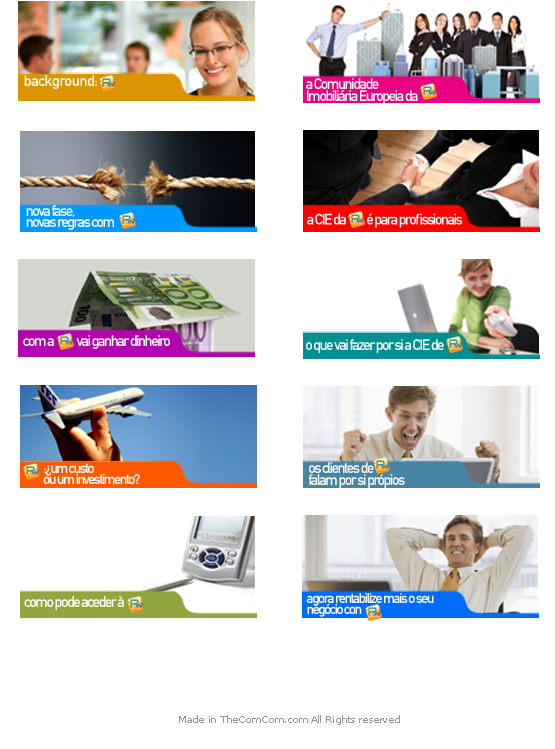
<style>
.page{position:relative;width:555px;height:749px;background:#ffffff}
.page>*{position:absolute;margin:0}
.t1{font:15px "DINMittelschriftStd";letter-spacing:-0.025em;color:#ffffff}
.t2{font:15px/12px "DINMittelschriftStd";letter-spacing:-0.1em;color:#ffffff}
.t3{font:15px/11.2px "DINMittelschriftStd";letter-spacing:-0.1em;color:#ffffff}
.t4{font:15px "DINMittelschriftStd";letter-spacing:-0.1em;color:#ffffff}
.t5{font:14px/11.2px "DINMittelschriftStd";letter-spacing:-0.1em;color:#ffffff}
.t6{font:10px "MSReferenceSansSerif";letter-spacing:-0.025em;color:#979595}
</style>
<div class="page">
<p class="t1" style="left:24px;top:75px;width:73px;height:14px">background:</p>
<p class="t2" style="left:306px;top:78px;width:112px;height:26px">a Comunidade <br>Imobiliária Europeia da</p>
<p class="t3" style="left:26px;top:205px;width:88px;height:25px">nova fase, <br>novas regras com</p>
<p class="t4" style="left:307px;top:213px;width:156px;height:15px"><span class="t1">      </span>a CIE da          é para profissionais</p>
<p class="t4" style="left:23px;top:335px;width:147px;height:14px">com a           vai ganhar dinheiro</p>
<p class="t4" style="left:306px;top:339px;width:138px;height:14px">o que vai fazer por si a CIE de</p>
<p class="t3" style="left:308px;top:462px;width:97px;height:26px">os clientes de          <br>falam por si própios</p>
<p class="t5" style="left:43px;top:463px;width:97px;height:21px">:¿um custo <br>ou um investimento?</p>
<p class="t5" style="left:306px;top:593px;width:128px;height:24px">agora rentabilize mais o seu negócio con</p>
<p class="t4" style="left:24px;top:596px;width:100px;height:14px">como pode aceder à</p>
<p class="t6" style="left:179px;top:715px;width:221px;height:10px">Made in TheComCom.com All Rights reserved</p>
</div>
